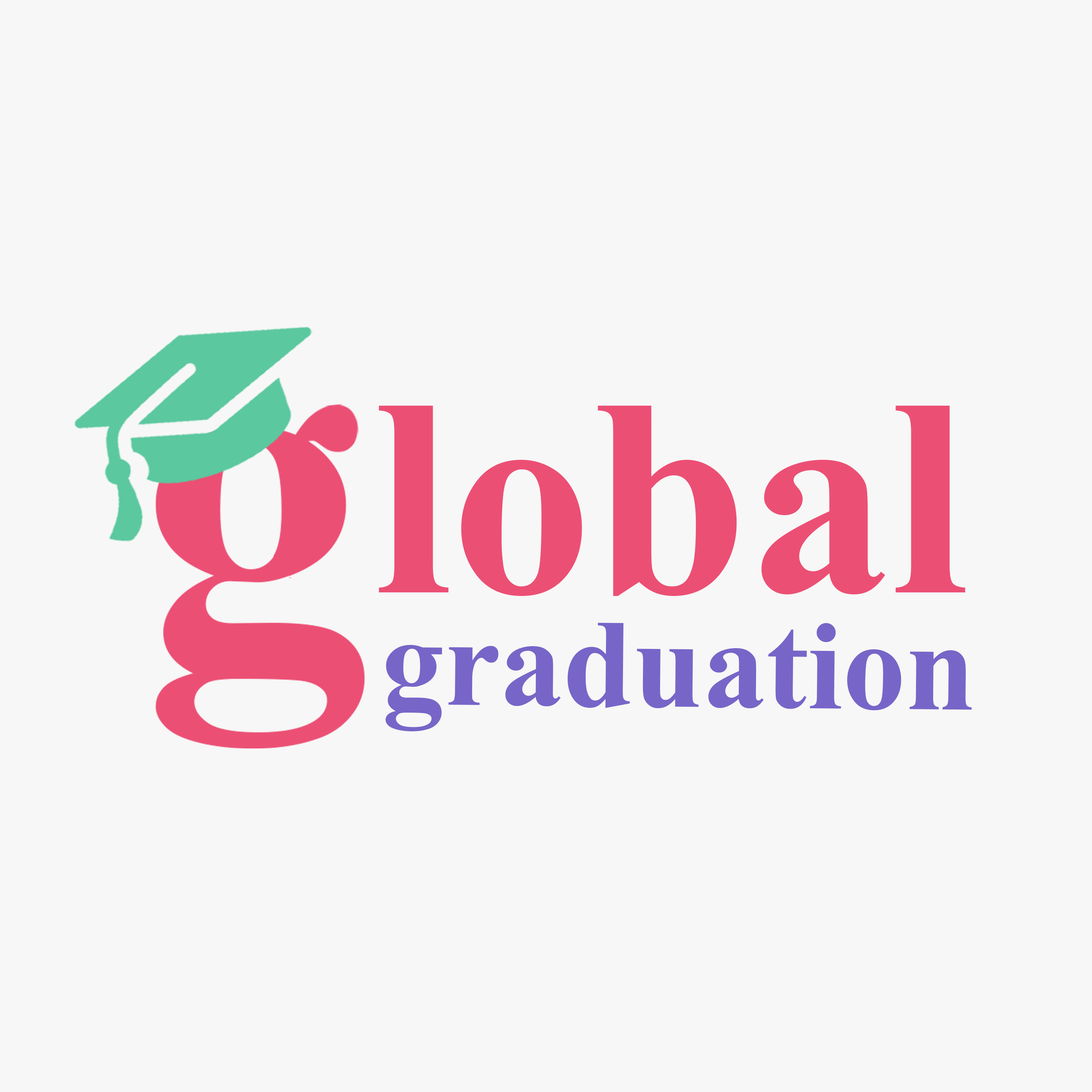
<style>
.page{position:relative;width:1092px;height:1092px;background:#f7f7f7}
.page>*{position:absolute;margin:0}
.t1{font:281.8px "TimesNewRomanPS-BoldMT";color:#ec4f74}
.t2{font:125.9px "TimesNewRomanPS-BoldMT";color:#7765c8}
</style>
<div class="page">
<p class="t1" style="left:379px;top:406px;width:586px;height:190px">lobal</p>
<p class="t2" style="left:385px;top:623px;width:587px;height:108px;rotate:1deg">graduation</p>
</div>
